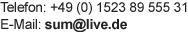
<style>
.page{position:relative;width:188px;height:32px;background:#ffffff}
.page>*{position:absolute;margin:0}
.t1{font:14px "ArialMT";letter-spacing:-0.024em;color:#222222}
.t2{font:14px "Arial-BoldMT";letter-spacing:-0.024em;color:#222222}
</style>
<div class="page">
<p class="t1" style="left:0px;top:2px;width:187px;height:31px">Telefon: +49 (0) 1523 89 555 31<br>E-Mail: <span class="t2">sum@live.de</span></p>
</div>
